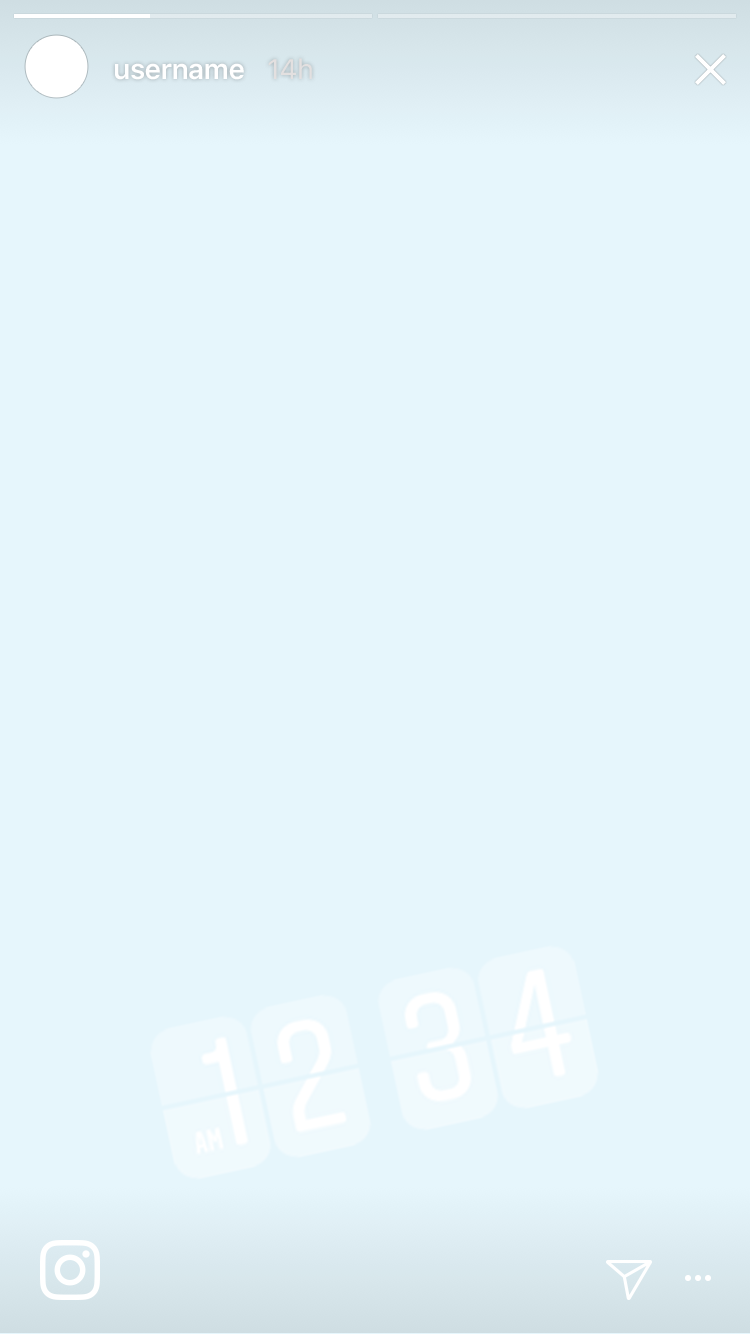
<style>
.page{position:relative;width:750px;height:1334px;background:#e6f6fc}
.page>*{position:absolute;margin:0}
.t1{font:28px "SFUIText-Semibold";letter-spacing:-0.025em;color:#ffffff}
.t2{font:28px "SFUIText-Regular";letter-spacing:-0.025em;color:#e3e0e0}
</style>
<div class="page">
<p class="t1" style="left:115px;top:63px;width:129px;height:17px">username</p>
<p class="t2" style="left:268px;top:58px;width:44px;height:21px">14h</p>
</div>
